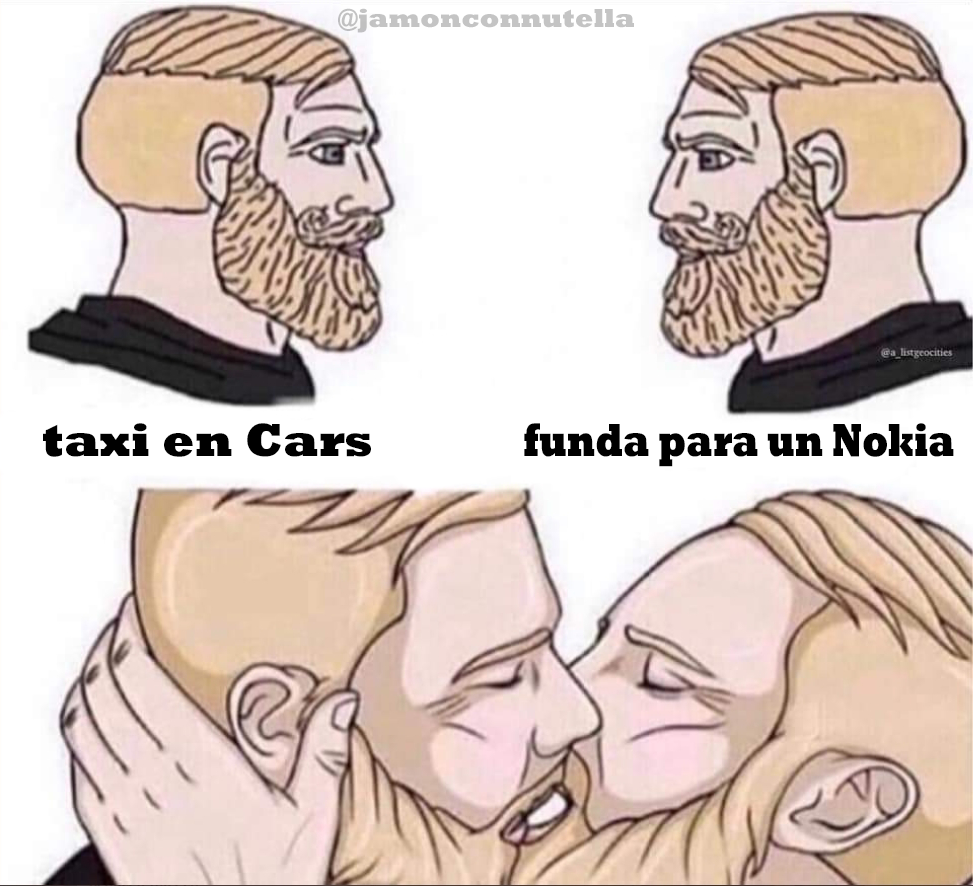
<style>
.page{position:relative;width:973px;height:886px;background:#ffffff}
.page>*{position:absolute;margin:0}
.t1{font:26.5px "Rockwell-ExtraBold";color:#c4c4c4}
.t2{font:47.3px "Rockwell-ExtraBold";color:#000000}
.t3{font:47.2px "Rockwell-ExtraBold";color:#000000;scale:0.74 1}
</style>
<div class="page">
<p class="t1" style="left:338px;top:8px;width:296px;height:25px">@jamonconnutella</p>
<p class="t2" style="left:43px;top:423px;width:328px;height:34px">taxi en Cars</p>
<p class="t3" style="left:524px;top:423px;width:430px;height:44px">funda para un Nokia</p>
</div>
